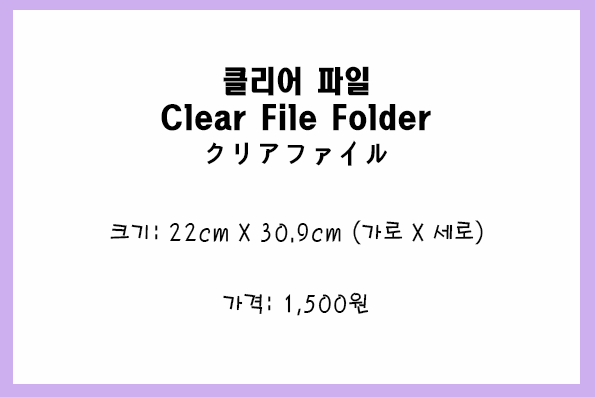
<style>
.page{position:relative;width:595px;height:397px;background:#fffefe}
.page>*{position:absolute;margin:0}
.t1{font:30px/36px "HeadlineR-HM";color:#010101;scale:0.9 1}
.t2{font:24px "H2porM";color:#040404;scale:0.9 1}
</style>
<div class="page">
<p class="t1" style="left:161px;top:66px;width:270px;height:100px;text-align:center">클리어 파일<br>Clear File Folder<br>クリアファイル</p>
<p class="t2" style="left:110px;top:220px;width:373px;height:25px">크기: 22cm X 30.9cm (가로 X 세로)</p>
<p class="t2" style="left:223px;top:292px;width:146px;height:24px">가격: 1,500원</p>
</div>
